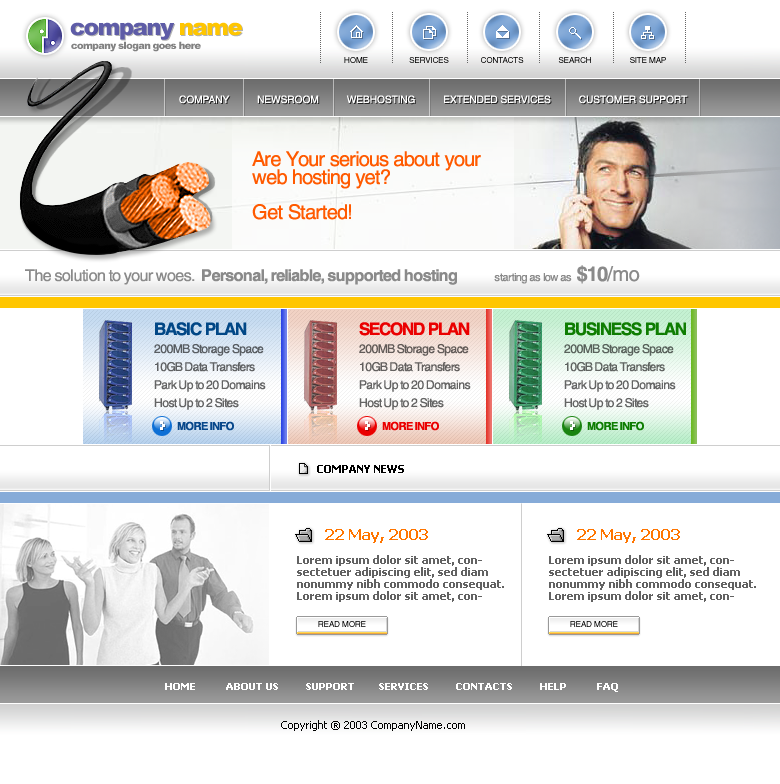
<style>
.page{position:relative;width:780px;height:784px;background:#ffffff}
.page>*{position:absolute;margin:0}
.t1{font:23px "Arial-Black";letter-spacing:-0.07em;color:#5e5ca7}
.t2{font:23px "Arial-Black";letter-spacing:-0.07em;color:#ffc600}
.t3{font:10px "Arial-Black";letter-spacing:-0.07em;color:#818181}
.t4{font:8px "Helios";letter-spacing:-0.01em;color:#000000}
.t5{font:8px "Helios";letter-spacing:-0.01em}
.t6{font:10px "Helios";color:#ffffff}
.t7{font:20px/18px "Helios";letter-spacing:-0.04em;color:#ff5a00}
.t8{font:20px/17px "Helios";letter-spacing:-0.04em;color:#ff5a00}
.t9{font:16px "Helios-Bold";letter-spacing:-0.04em;color:#8a8a8a}
.t10{font:16px "Helios";letter-spacing:-0.04em;color:#8a8a8a}
.t11{font:11px "Helios";letter-spacing:-0.04em;color:#8a8a8a}
.t12{font:20px "Helios-Bold";letter-spacing:-0.04em;color:#8a8a8a}
.t13{font:20px "Helios";letter-spacing:-0.04em;color:#8a8a8a}
.t14{font:17px "Helios-Bold";letter-spacing:-0.06em;color:#014786}
.t15{font:17px "Helios-Bold";letter-spacing:-0.06em;color:#ea0000}
.t16{font:17px "Helios-Bold";letter-spacing:-0.06em;color:#0e7d02}
.t17{font:12px/18px "Helios";letter-spacing:-0.06em;color:#606264}
.t18{font:12px/18px "Helios";letter-spacing:-0.06em;color:#646160}
.t19{font:12px/18px "Helios";letter-spacing:-0.06em;color:#606461}
.t20{font:11px "Helios-Bold";letter-spacing:-0.06em;color:#08488b}
.t21{font:11px "Helios-Bold";letter-spacing:-0.06em;color:#ea0000}
.t22{font:11px "Helios-Bold";letter-spacing:-0.06em;color:#0e7d02}
.t23{font:11px "Tahoma-Bold";color:#000000}
.t24{font:11px/12px "Tahoma-Bold";color:#626262}
.t25{font:11px/12px "Tahoma";color:#000000}
.t26{font:15px/12px "Tahoma-Bold";color:#ff7500}
.t27{font:10px "Tahoma-Bold";color:#ffffff}
.t28{font:11px "Tahoma";color:#000000}
</style>
<div class="page">
<p class="t1" style="left:70px;top:22px;width:172px;height:18px">company <span class="t2">name</span></p>
<p class="t3" style="left:71px;top:41px;width:130px;height:11px">company slogan goes here</p>
<p class="t4" style="left:344px;top:57px;width:24px;height:6px">HOME</p>
<p class="t5" style="left:409px;top:57px;width:40px;height:6px">SERVICES</p>
<p class="t4" style="left:481px;top:57px;width:43px;height:6px">CONTACTS</p>
<p class="t5" style="left:558px;top:57px;width:33px;height:6px">SEARCH</p>
<p class="t4" style="left:630px;top:57px;width:36px;height:6px">SITE MAP</p>
<p class="t6" style="left:179px;top:95px;width:509px;height:9px">COMPANY          NEWSROOM          WEBHOSTING          EXTENDED SERVICES          CUSTOMER SUPPORT</p>
<p class="t7" style="left:252px;top:151px;width:229px;height:69px">Are Your serious about your<br>web hosting yet?<br><br><span class="t8">Get Started!</span></p>
<p class="t9" style="left:25px;top:265px;width:615px;height:20px"><span class="t10">The solution to your woes.  </span>Personal, reliable, supported hosting           <span class="t11">starting as low as  </span><span class="t12">$10</span><span class="t13">/mo</span></p>
<p class="t14" style="left:155px;top:322px;width:92px;height:14px">BASIC PLAN</p>
<p class="t15" style="left:359px;top:322px;width:111px;height:14px">SECOND PLAN</p>
<p class="t16" style="left:565px;top:322px;width:121px;height:14px">BUSINESS PLAN</p>
<p class="t17" style="left:154px;top:344px;width:112px;height:66px">200MB Storage Space <br>10GB Data Transfers<br>Park Up to 20 Domains<br>Host Up to 2 Sites</p>
<p class="t18" style="left:359px;top:344px;width:112px;height:66px">200MB Storage Space <br>10GB Data Transfers<br>Park Up to 20 Domains<br>Host Up to 2 Sites</p>
<p class="t19" style="left:564px;top:344px;width:112px;height:66px">200MB Storage Space <br>10GB Data Transfers<br>Park Up to 20 Domains<br>Host Up to 2 Sites</p>
<p class="t20" style="left:177px;top:421px;width:57px;height:10px">MORE INFO</p>
<p class="t21" style="left:382px;top:421px;width:57px;height:10px">MORE INFO</p>
<p class="t22" style="left:587px;top:421px;width:57px;height:10px">MORE INFO</p>
<p class="t23" style="left:317px;top:465px;width:87px;height:8px">COMPANY NEWS</p>
<p class="t24" style="left:297px;top:529px;width:207px;height:73px"><span class="t25">●       </span><span class="t26">22 May, 2003<br><br></span>Lorem ipsum dolor sit amet, consectetuer adipiscing elit, sed diam nonummy nibh commodo consequat. Lorem ipsum dolor sit amet, consectetuer adipiscing elit.</p>
<p class="t24" style="left:549px;top:529px;width:207px;height:73px"><span class="t25">●       </span><span class="t26">22 May, 2003<br><br></span>Lorem ipsum dolor sit amet, consectetuer adipiscing elit, sed diam nonummy nibh commodo consequat. Lorem ipsum dolor sit amet, consectetuer adipiscing elit.</p>
<p class="t4" style="left:318px;top:621px;width:48px;height:6px">READ MORE</p>
<p class="t4" style="left:570px;top:621px;width:48px;height:6px">READ MORE</p>
<p class="t27" style="left:165px;top:683px;width:453px;height:9px">HOME          ABOUT US         SUPPORT        SERVICES         CONTACTS         HELP          FAQ</p>
<p class="t28" style="left:281px;top:720px;width:184px;height:11px">Copyright ® 2003 CompanyName.com</p>
</div>
